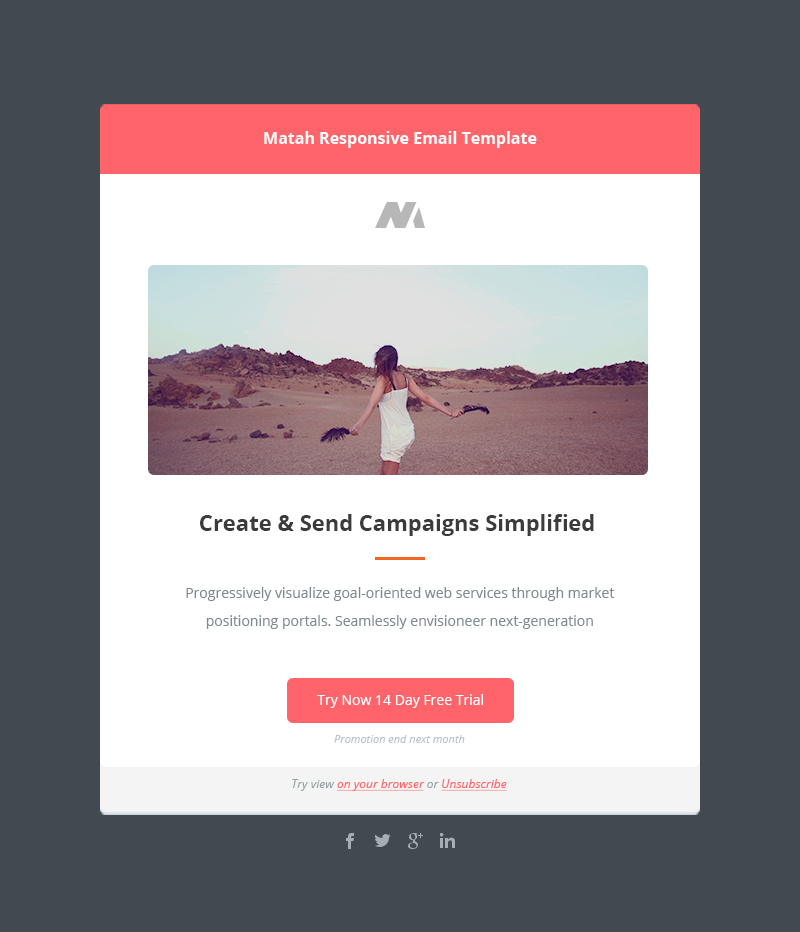
<style>
.page{position:relative;width:800px;height:932px;background:#414a51}
.page>*{position:absolute;margin:0}
.t1{font:16px "OpenSans-Bold";color:#fffefe}
.t2{font:22px "OpenSans-Bold";color:#3b3b3b}
.t3{font:14px/28px "OpenSans";color:#7f8c8d}
.t4{font:14px "OpenSans";color:#ffffff}
.t5{font:11px "OpenSans-Italic";color:#bdc3c7}
.t6{font:12px "OpenSans-Italic";color:#ff646a;text-decoration:underline}
.t7{font:12px "OpenSans-Italic";color:#95a5a6}
</style>
<div class="page">
<p class="t1" style="left:264px;top:131px;width:273px;height:17px">Matah Responsive Email Template</p>
<p class="t2" style="left:200px;top:514px;width:394px;height:22px">Create &amp; Send Campaigns Simplified</p>
<p class="t3" style="left:186px;top:587px;width:429px;height:42px;text-align:center">Progressively visualize goal-oriented web services through market positioning portals. Seamlessly envisioneer next-generation</p>
<p class="t4" style="left:317px;top:694px;width:166px;height:14px">Try Now 14 Day Free Trial</p>
<p class="t5" style="left:334px;top:735px;width:131px;height:8px">Promotion end next month</p>
<p class="t6" style="left:292px;top:779px;width:215px;height:12px"><span class="t7">Try view </span>on your browser <span class="t7">or </span>Unsubscribe</p>
</div>
